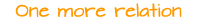
<style>
.page{position:relative;width:200px;height:24px;background:#ffffff}
.page>*{position:absolute;margin:0}
.t1{font:16px "ArchitectsDaughter";color:#ff9900}
</style>
<div class="page">
<p class="t1" style="left:15px;top:3px;width:167px;height:14px">One more relation</p>
</div>
